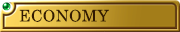
<style>
.page{position:relative;width:180px;height:32px}
.page>*{position:absolute;margin:0}
.t1{font:16px "CenturySchoolbook";letter-spacing:0.025em;color:#321a02}
</style>
<div class="page">
<p class="t1" style="left:19px;top:9px;width:90px;height:13px">ECONOMY</p>
</div>
